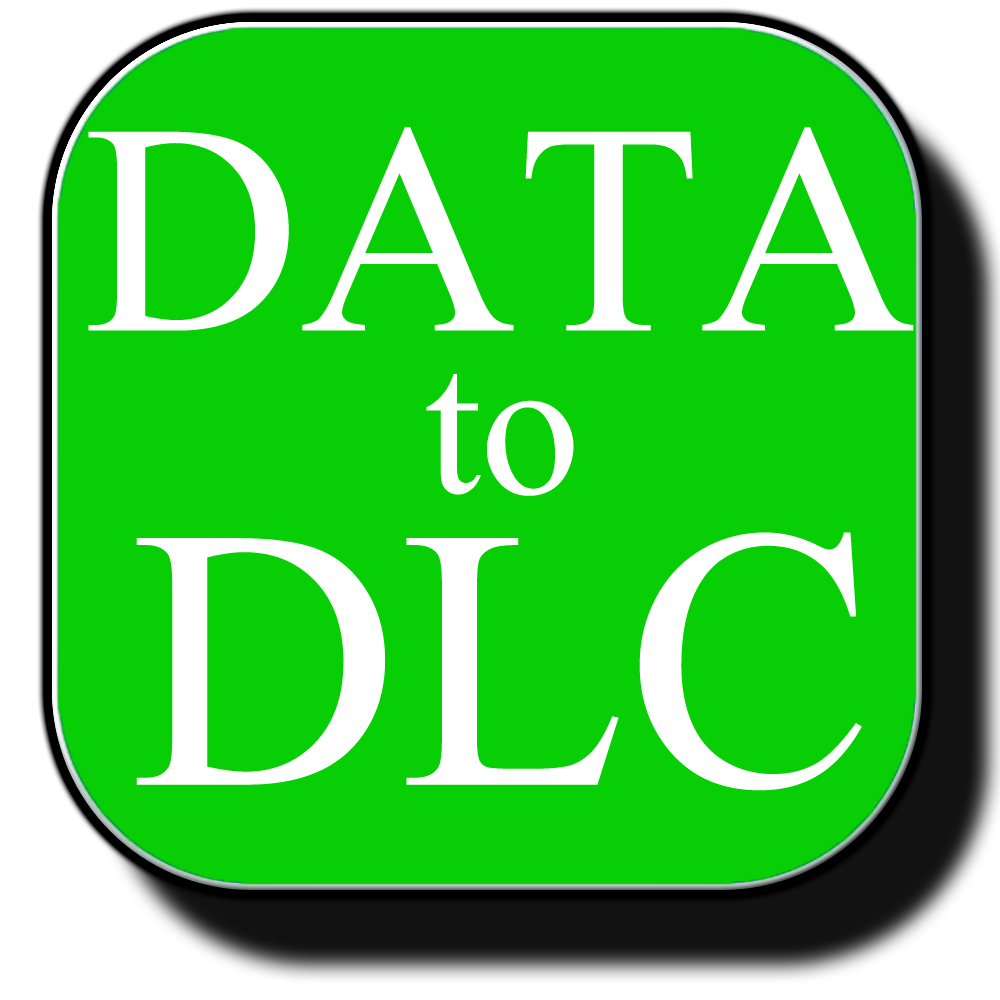
<style>
.page{position:relative;width:1000px;height:1000px;background:#08ce06}
.page>*{position:absolute;margin:0}
.t1{font:300px "TimesNewRomanPSMT";color:#ffffff}
.t2{font:200px "TimesNewRomanPSMT";color:#ffffff}
.t3{font:372px "TimesNewRomanPSMT";color:#ffffff}
</style>
<div class="page">
<p class="t1" style="left:88px;top:127px;width:826px;height:204px">DATA</p>
<p class="t2" style="left:426px;top:374px;width:148px;height:122px">to</p>
<p class="t3" style="left:136px;top:532px;width:726px;height:259px">DLC</p>
</div>
